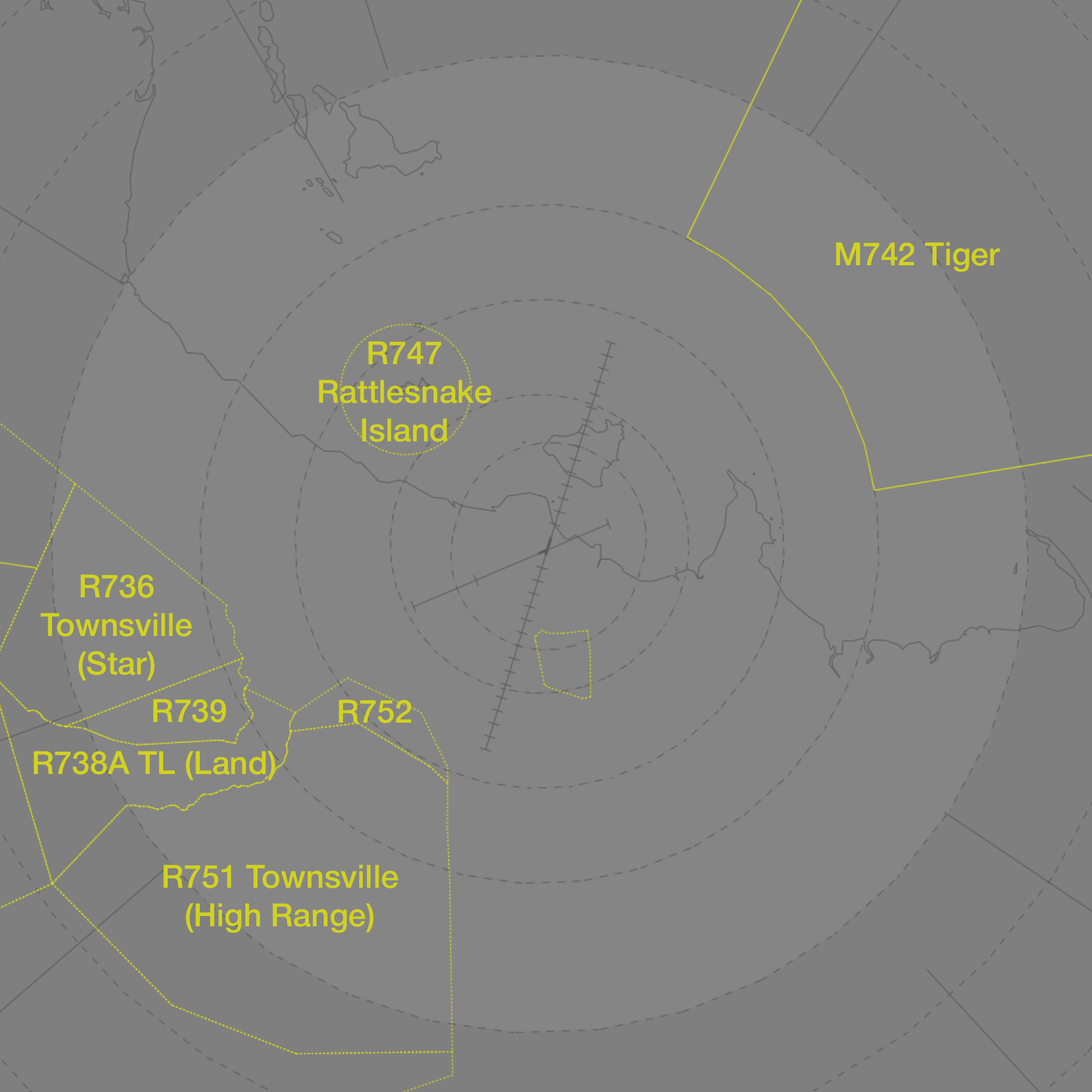
<style>
.page{position:relative;width:1092px;height:1092px;background:#858585}
.page>*{position:absolute;margin:0}
.t1{font:32.1px "HelveticaNeue-Medium";color:#d2d21e}
</style>
<div class="page">
<p class="t1" style="left:836px;top:242px;width:164px;height:30px">M742 Tiger</p>
<p class="t1" style="left:319px;top:341px;width:172px;height:101px;text-align:center">R747<br>Rattlesnake<br>Island</p>
<p class="t1" style="left:40px;top:574px;width:152px;height:107px;text-align:center">R736<br>Townsville<br>(Star)</p>
<p class="t1" style="left:153px;top:699px;width:73px;height:24px">R739</p>
<p class="t1" style="left:339px;top:700px;width:72px;height:23px">R752</p>
<p class="t1" style="left:33px;top:751px;width:243px;height:29px">R738A TL (Land)</p>
<p class="t1" style="left:163px;top:865px;width:235px;height:68px;text-align:center">R751 Townsville<br>(High Range)</p>
</div>
